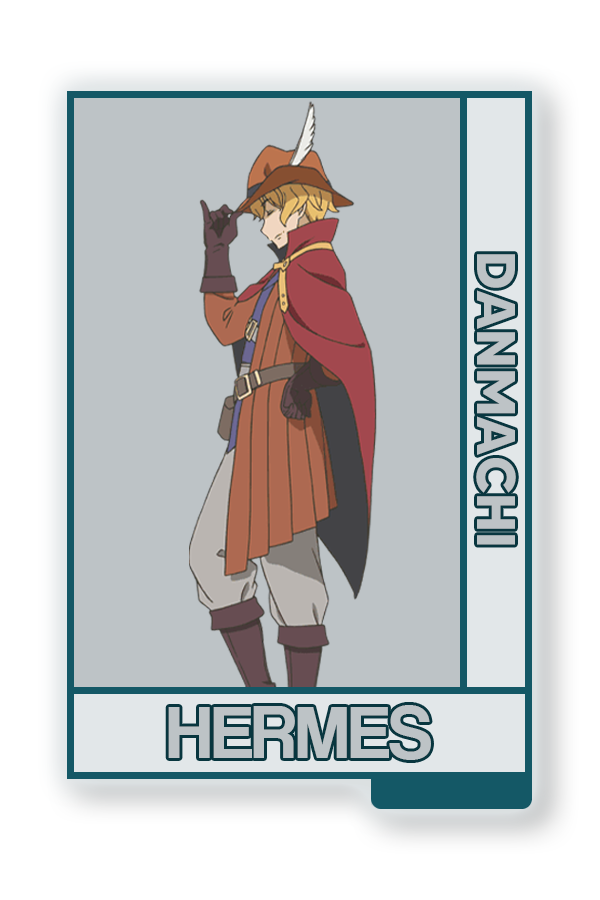
<style>
.page{position:relative;width:600px;height:900px;background:#bdc3c6}
.page>*{position:absolute;margin:0}
.t1{font:54.4px "MADETOMMY-Bold";color:#bdc3c6}
.t2{font:76px "CoolveticaRg-Regular";color:#bdc3c6}
</style>
<div class="page">
<p class="t1" style="left:476px;top:254px;width:40px;height:291px;rotate:90deg">DANMACHI</p>
<p class="t2" style="left:168px;top:705px;width:263px;height:55px">HERMES</p>
</div>
